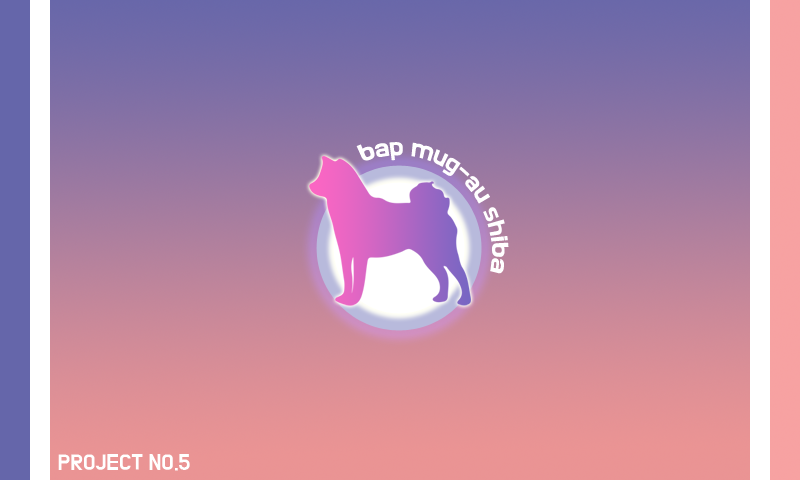
<style>
.page{position:relative;width:800px;height:480px}
.page>*{position:absolute;margin:0}
.t1{font:18.1px "BMDoHyeon";color:#ffffff}
.t2{font:18px "BMDoHyeon";color:#ffffff}
</style>
<div class="page">
<p class="t1" style="left:356px;top:142px;width:153px;height:132px;rotate:41deg">bap mug-au shiba</p>
<p class="t2" style="left:58px;top:454px;width:132px;height:17px">PROJECT NO.5</p>
</div>
